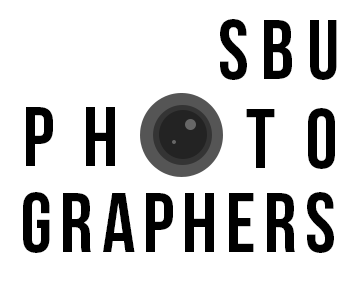
<style>
.page{position:relative;width:356px;height:300px;background:#ffffff}
.page>*{position:absolute;margin:0}
.t1{font:83.6px "BebasNeue";color:#000000}
.t2{font:83.6px "BebasNeue";letter-spacing:0.1em;color:#000000}
.t3{font:83.7px "BebasNeue";letter-spacing:0.1em;color:#000000}
</style>
<div class="page">
<p class="t1" style="left:220px;top:19px;width:117px;height:61px">S B U</p>
<p class="t2" style="left:26px;top:107px;width:89px;height:59px">P H</p>
<p class="t2" style="left:246px;top:108px;width:89px;height:61px">T O</p>
<p class="t3" style="left:23px;top:192px;width:311px;height:61px">GRAPHERS</p>
</div>
